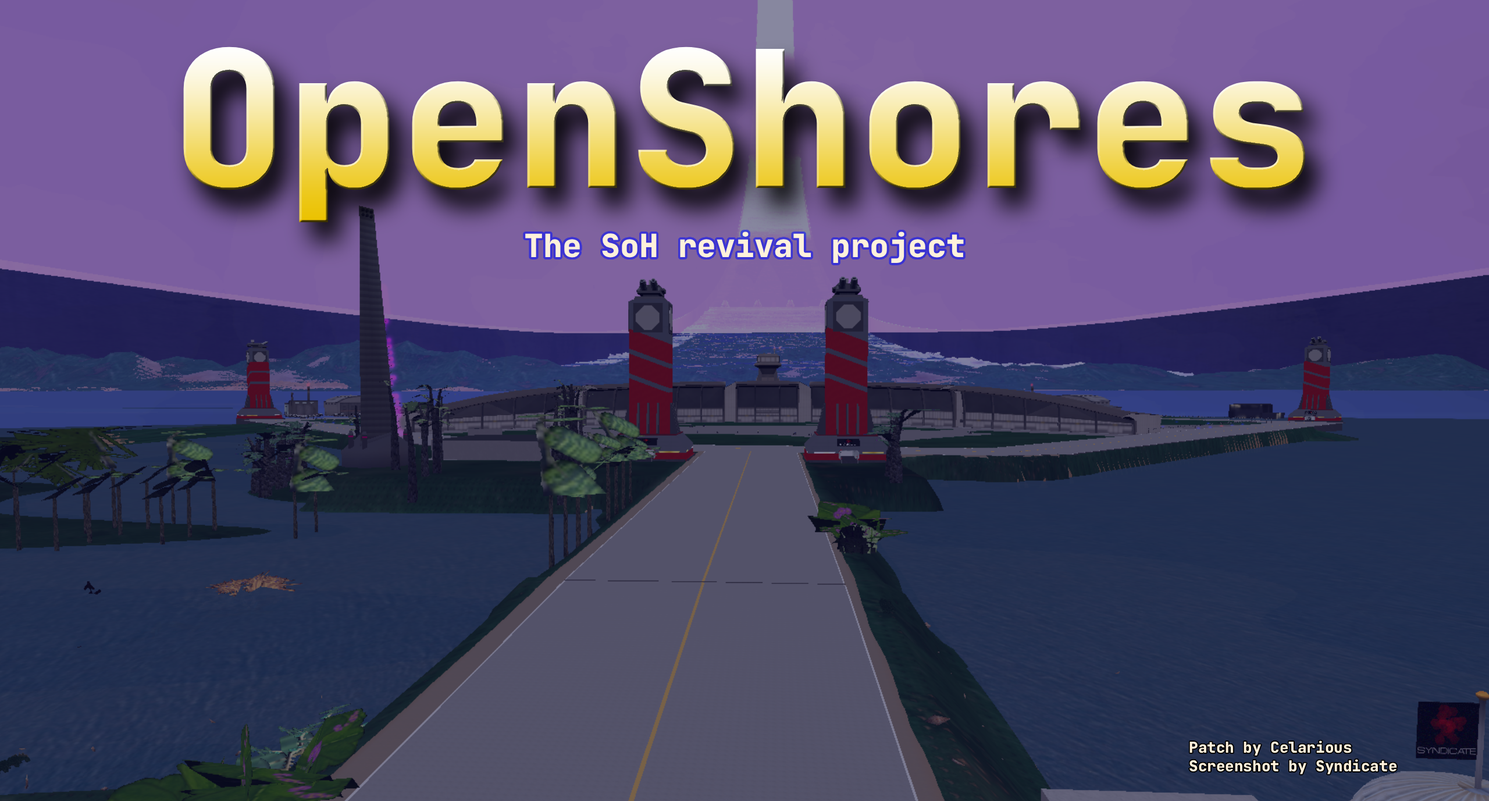
<style>
.page{position:relative;width:1489px;height:801px}
.page>*{position:absolute;margin:0}
.t1{font:190.3px "JetBrainsMonoRoman-ExtraBold"}
.t2{font:32px "JetBrainsMonoRoman-ExtraBold";color:#fff1db}
.t3{font:15.1px "JetBrainsMonoRoman-ExtraBold";color:#fff1db}
</style>
<div class="page">
<p class="t1" style="left:183px;top:47px;width:1122px;height:175px">OpenShores</p>
<p class="t2" style="left:525px;top:231px;width:439px;height:32px">The SoH revival project</p>
<p class="t3" style="left:1189px;top:740px;width:163px;height:16px">Patch by Celarious</p>
<p class="t3" style="left:1189px;top:759px;width:208px;height:15px">Screenshot by Syndicate</p>
</div>
